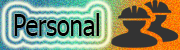
<style>
.page{position:relative;width:180px;height:50px}
.page>*{position:absolute;margin:0}
.t1{font:30px "Tahoma";color:#000000;scale:0.78 1}
</style>
<div class="page">
<p class="t1" style="left:14px;top:13px;width:85px;height:23px">Personal</p>
</div>
